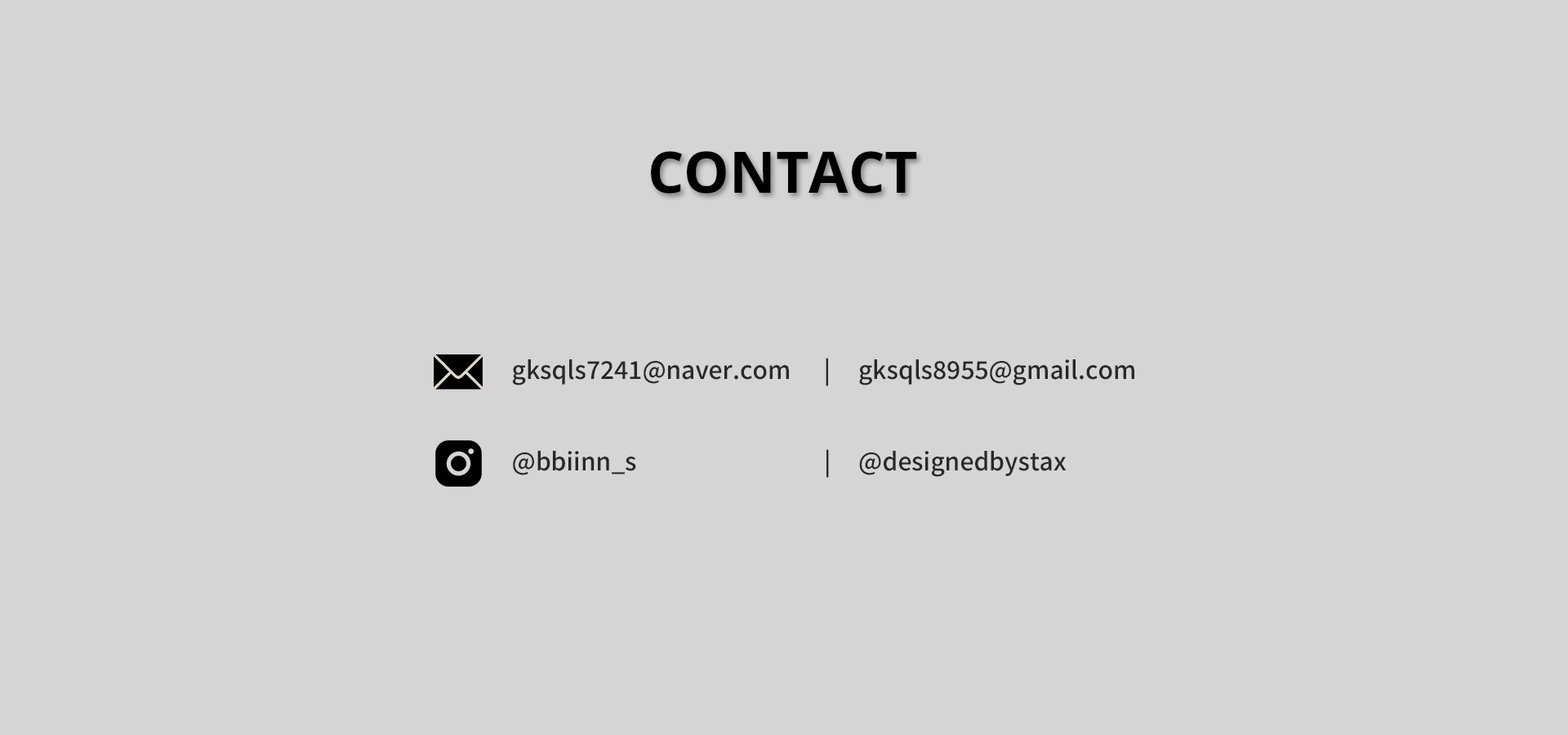
<style>
.page{position:relative;width:1568px;height:735px;background:#d5d5d5}
.page>*{position:absolute;margin:0}
.t1{font:57.2px "NotoSans-Bold";color:#000000}
.t2{font:24.5px "NotoSansKR-Medium";color:#282828}
</style>
<div class="page">
<p class="t1" style="left:651px;top:151px;width:266px;height:43px">CONTACT</p>
<p class="t2" style="left:513px;top:358px;width:621px;height:28px">gksqls7241@naver.com      |     gksqls8955@gmail.com</p>
<p class="t2" style="left:513px;top:449px;width:554px;height:29px">@bbiinn_s                                  |     @designedbystax</p>
</div>
